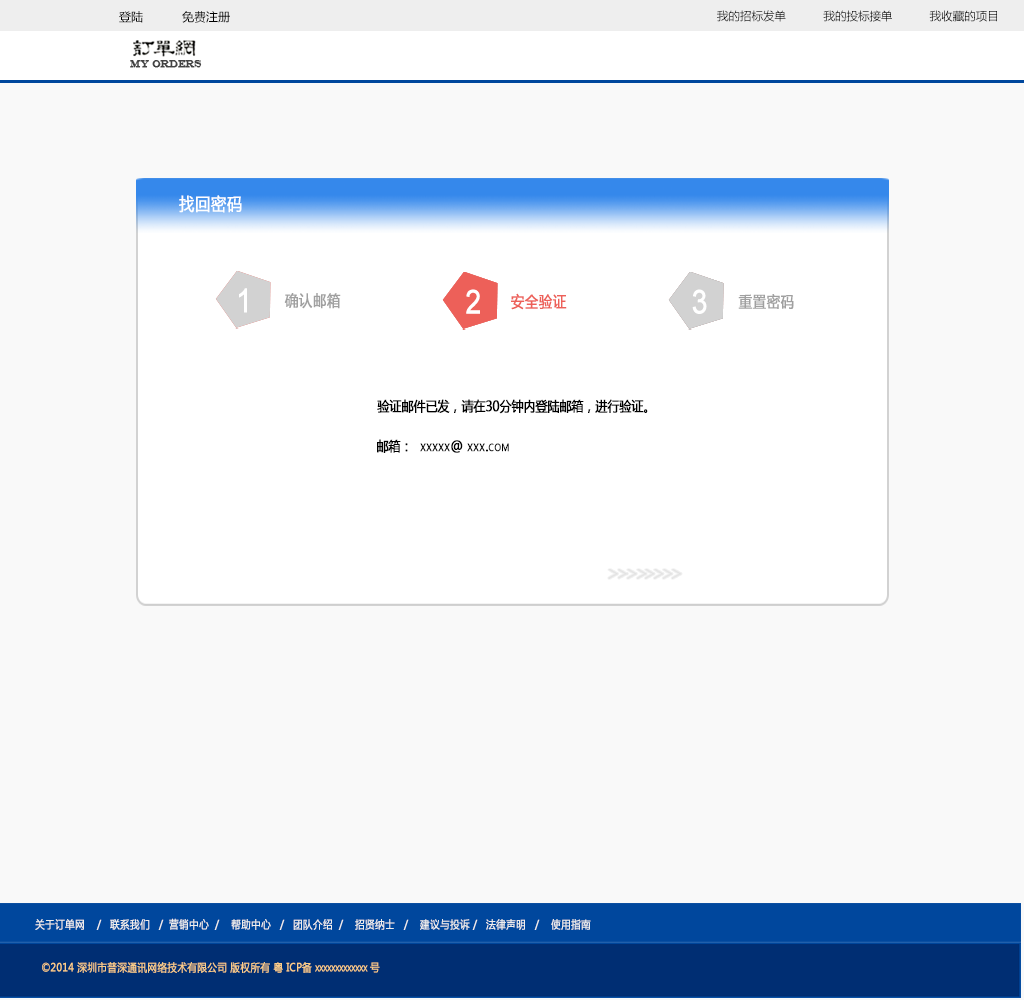
<style>
.page{position:relative;width:1024px;height:1000px;background:#f9f9f9}
.page>*{position:absolute;margin:0}
.t1{font:12px "MicrosoftYaHei";color:#000000}
.t2{font:11.5px "MicrosoftYaHei";color:#000000}
.t3{font:9.9px "EngraversMT";color:#434343;font-variant:small-caps;font-weight:bold;scale:0.86 1}
.t4{font:17.6px "MicrosoftYaHei";color:#ffffff;font-variant:small-caps;font-weight:bold;scale:0.86 1}
.t5{font:33px "ArialMT";color:#ffffff;font-variant:small-caps;font-weight:bold;scale:0.86 1}
.t6{font:15.4px "MicrosoftYaHei";color:#a0a0a0;font-variant:small-caps;font-weight:bold;scale:0.86 1}
.t7{font:15.4px "MicrosoftYaHei";color:#ed6059;font-variant:small-caps;font-weight:bold;scale:0.86 1}
.t8{font:13.8px "MicrosoftYaHei";color:#000000;font-variant:small-caps;font-weight:bold;scale:0.86 1}
.t9{font:11px "MicrosoftYaHei";color:#eeeeee;font-variant:small-caps;font-weight:bold;scale:0.86 1}
.t10{font:15.4px "STXihei";color:#eeeeee;font-variant:small-caps;font-weight:bold;scale:0.86 1}
.t11{font:11px "MicrosoftYaHei";color:#facd89;font-variant:small-caps;font-weight:bold;scale:0.87 1}
.t12{font:11px "MicrosoftYaHei";color:#eeeeee;font-variant:small-caps;font-weight:bold;scale:0.87 1}
</style>
<div class="page">
<p class="t1" style="left:119px;top:11px;width:111px;height:12px">登陆           免费注册</p>
<p class="t2" style="left:717px;top:10px;width:280px;height:12px">我的招标发单           我的投标接单           我收藏的项目</p>
<p class="t3" style="left:130px;top:60px;width:72px;height:8px">MY ORDERS</p>
<p class="t4" style="left:179px;top:195px;width:63px;height:18px">找回密码</p>
<p class="t5" style="left:239px;top:288px;width:8px;height:25px">1</p>
<p class="t6" style="left:284px;top:293px;width:57px;height:16px">确认邮箱</p>
<p class="t5" style="left:466px;top:289px;width:14px;height:25px">2</p>
<p class="t7" style="left:511px;top:293px;width:56px;height:17px">安全验证</p>
<p class="t5" style="left:692px;top:289px;width:15px;height:25px">3</p>
<p class="t6" style="left:738px;top:294px;width:56px;height:15px">重置密码</p>
<p class="t8" style="left:377px;top:399px;width:271px;height:15px">验证邮件已发，请在30分钟内登陆邮箱，进行验证。</p>
<p class="t8" style="left:377px;top:439px;width:132px;height:14px">邮箱：  xxxxx@ xxx.com</p>
<p class="t9" style="left:35px;top:918px;width:556px;height:12px"><span class="t10"><br><br></span>关于订单网    /   联系我们   /  营销中心  /    帮助中心   /   团队介绍  /    招贤纳士   /    建议与投诉 /   法律声明   /    使用指南</p>
<p class="t11" style="left:42px;top:962px;width:338px;height:11px"><span class="t12"> </span>©2014 深圳市普深通讯网络技术有限公司 版权所有 粤 ICP备 xxxxxxxxxxxxx 号</p>
</div>
